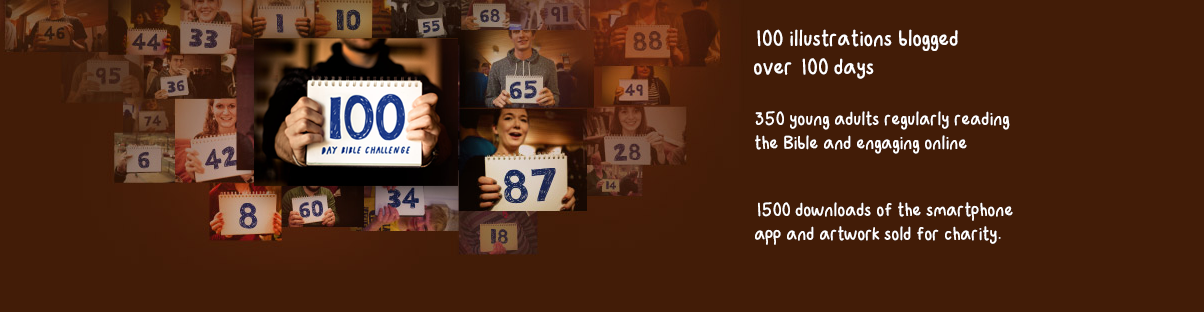
<style>
.page{position:relative;width:1204px;height:312px;background:#421c07}
.page>*{position:absolute;margin:0}
.t1{font:21.4px/28.5px "Epicfont1";color:#ffffff}
.t2{font:18px/24px "Epicfont1";color:#ffffff}
.t3{font:18px/20px "Epicfont1";color:#ffffff}
</style>
<div class="page">
<p class="t1" style="left:754px;top:29px;width:204px;height:50px">100 illustrations blogged<br>over 100 days</p>
<p class="t2" style="left:755px;top:111px;width:255px;height:43px">350 young adults regularly reading the Bible and engaging onli<span class="t3">ne</span></p>
<p class="t2" style="left:755px;top:202px;width:258px;height:43px">1500 downloads of the smartphone app and artwork sold for charity.</p>
</div>
